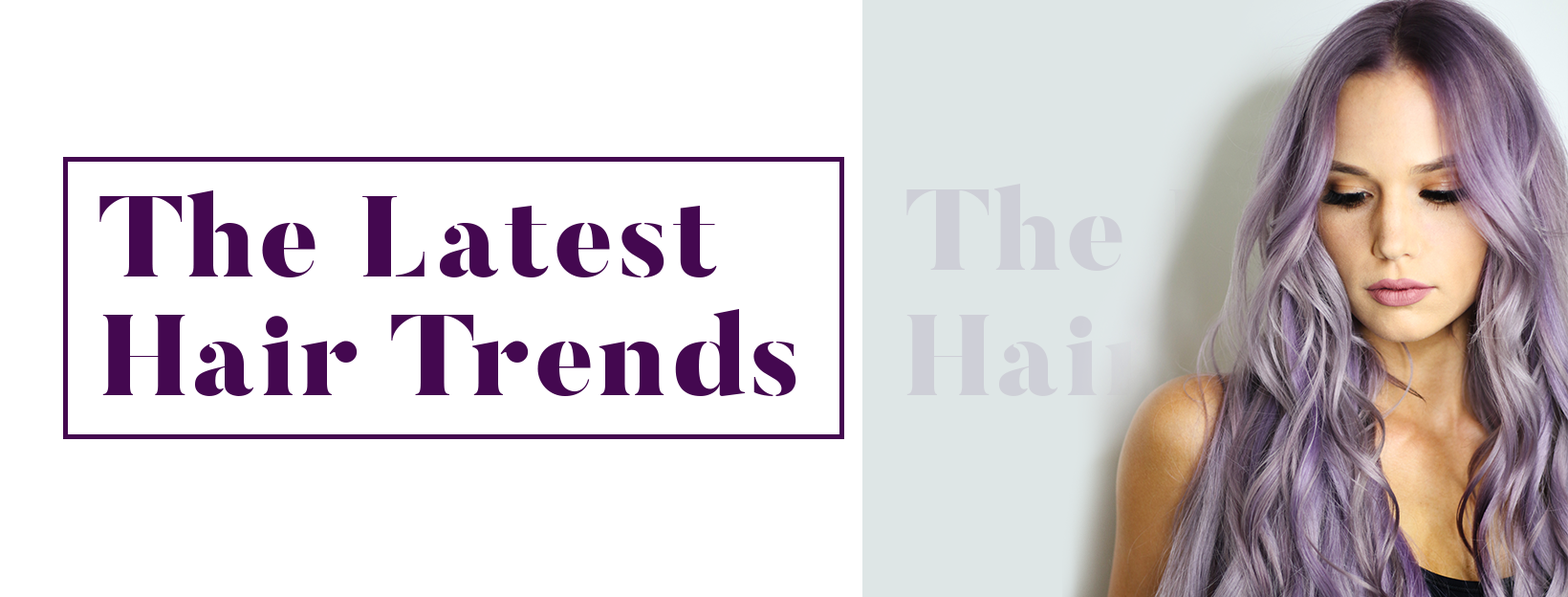
<style>
.page{position:relative;width:1568px;height:597px;background:#ffffff}
.page>*{position:absolute;margin:0}
.t1{font:114.7px "ButlerStencil-Black";letter-spacing:0.03em;color:#440850}
</style>
<div class="page">
<p class="t1" style="left:99px;top:190px;width:618px;height:87px">The Latest</p>
<p class="t1" style="left:102px;top:309px;width:694px;height:87px">Hair Trends</p>
</div>
